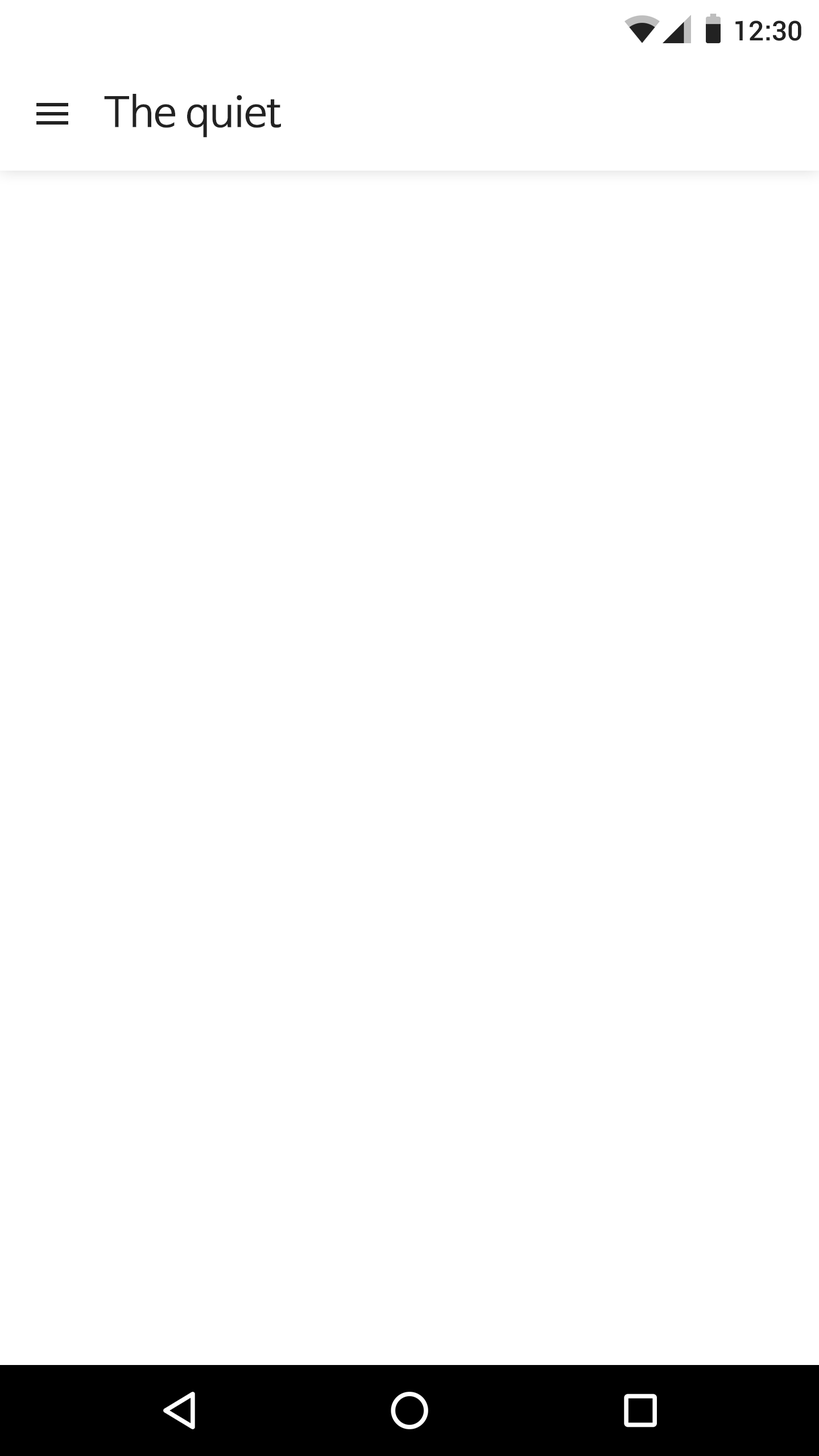
<style>
.page{position:relative;width:819px;height:1456px;background:#ffffff}
.page>*{position:absolute;margin:0}
.t1{font:27.3px "Roboto-Medium";color:#222222}
.t2{font:40.9px "NanumBarunGothic";color:#222222}
</style>
<div class="page">
<p class="t1" style="left:735px;top:20px;width:66px;height:21px">12:30</p>
<p class="t2" style="left:104px;top:94px;width:177px;height:44px">The quiet</p>
</div>
